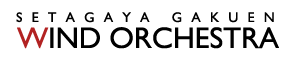
<style>
.page{position:relative;width:300px;height:70px;background:#ffffff}
.page>*{position:absolute;margin:0}
.t1{font:14px "GillSans";letter-spacing:0.66em;color:#000000}
.t2{font:30px "GillSans";letter-spacing:-0.005em;color:#000000}
.t3{font:30px "GillSans";letter-spacing:-0.005em;color:#b22222}
</style>
<div class="page">
<p class="t1" style="left:16px;top:12px;width:258px;height:11px">SETAGAYA GAKUEN</p>
<p class="t2" style="left:17px;top:27px;width:262px;height:22px"><span class="t3">W</span>IND ORCHESTRA</p>
</div>
